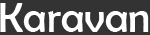
<style>
.page{position:relative;width:150px;height:35px;background:#333333}
.page>*{position:absolute;margin:0}
.t1{font:42px "BerlinSansFB-Reg";color:#ffffff}
</style>
<div class="page">
<p class="t1" style="left:0px;top:3px;width:149px;height:29px">Karavan</p>
</div>
